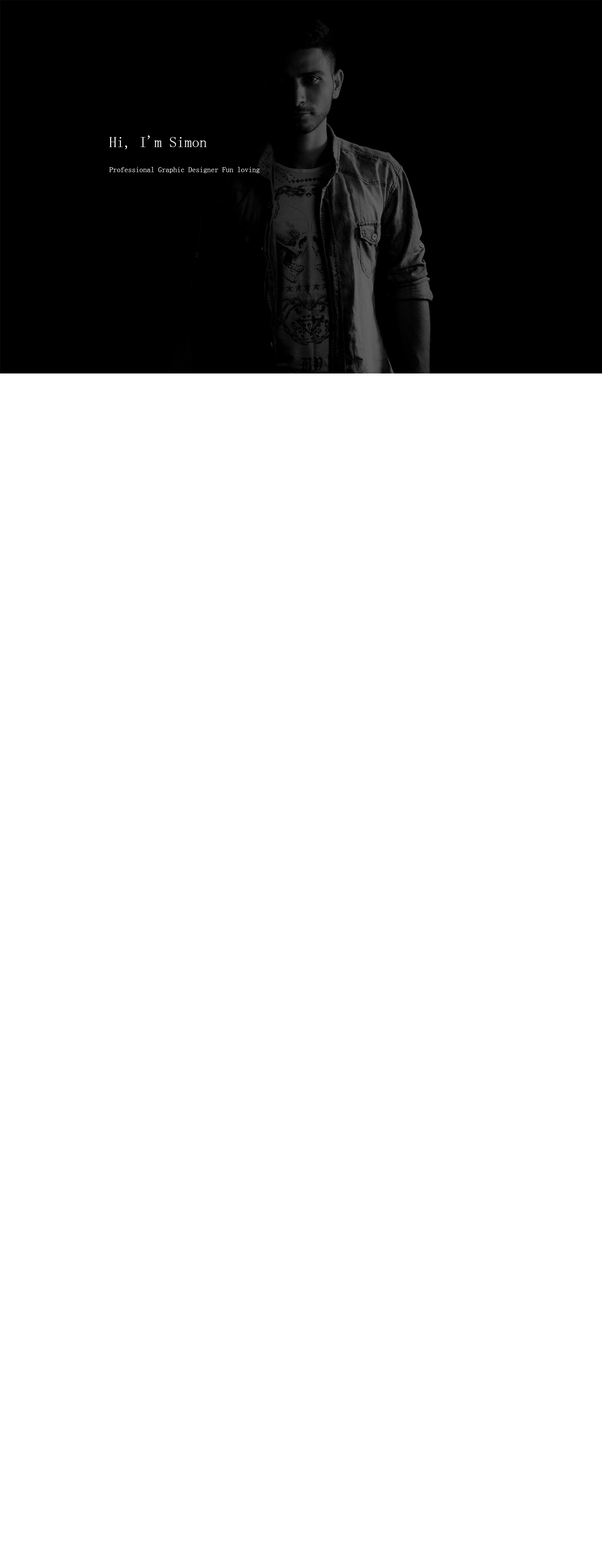
<style>
.page{position:relative;width:602px;height:1568px;background:#ffffff}
.page>*{position:absolute;margin:0}
.t1{font:15.1px "SimSun";color:#ffffff}
.t2{font:7.5px "SimSun";color:#ffffff}
</style>
<div class="page">
<p class="t1" style="left:109px;top:135px;width:98px;height:14px">Hi, I'm Simon</p>
<p class="t2" style="left:109px;top:167px;width:151px;height:6px">Professional Graphic Designer Fun loving</p>
</div>
